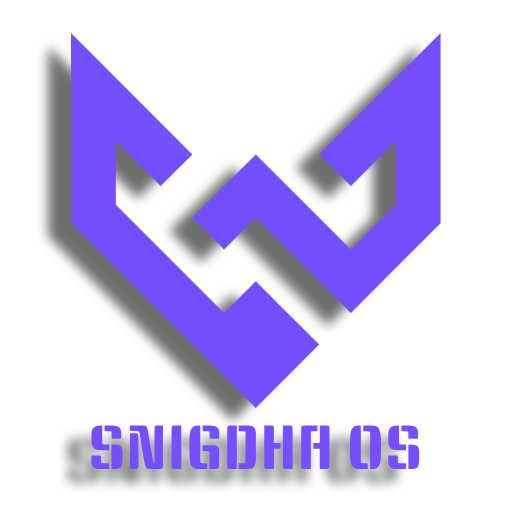
<style>
.page{position:relative;width:512px;height:512px;background:#ffffff}
.page>*{position:absolute;margin:0}
.t1{font:60.3px "KeaniaOne-Regular";color:#754ffe}
</style>
<div class="page">
<p class="t1" style="left:91px;top:425px;width:329px;height:45px">SNIGDHA OS</p>
</div>
